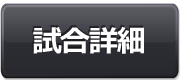
<style>
.page{position:relative;width:180px;height:80px}
.page>*{position:absolute;margin:0}
.t1{font:29.7px "Meiryo-Bold";letter-spacing:-0.05em;color:#ffffff;text-transform:uppercase}
</style>
<div class="page">
<p class="t1" style="left:33px;top:26px;width:111px;height:28px">試合詳細</p>
</div>
